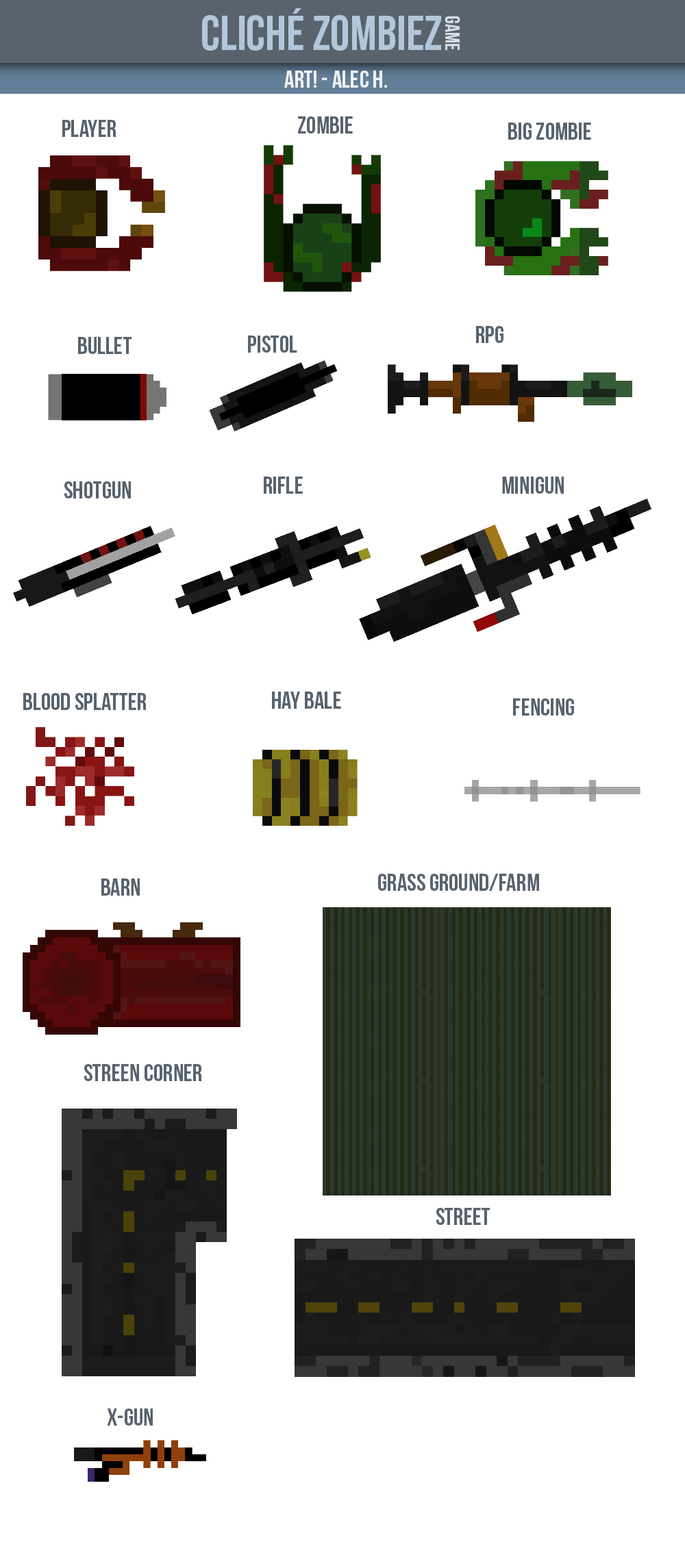
<style>
.page{position:relative;width:685px;height:1568px;background:#ffffff}
.page>*{position:absolute;margin:0}
.t1{font:49.3px "BebasNeue";color:#b2c7db}
.t2{font:20.5px "BebasNeue";color:#d7dfe7}
.t3{font:24.6px "BebasNeue";color:#f0f0f0}
.t4{font:24.6px "BebasNeue";color:#58636d}
</style>
<div class="page">
<p class="t1" style="left:202px;top:8px;width:239px;height:43px">Cliché zombiez</p>
<p class="t2" style="left:444px;top:16px;width:16px;height:35px;rotate:89deg">game</p>
<p class="t3" style="left:284px;top:71px;width:103px;height:17px">art! - Alec h.</p>
<p class="t4" style="left:62px;top:120px;width:54px;height:17px">PLAYER</p>
<p class="t4" style="left:298px;top:116px;width:55px;height:18px">ZOMBIE</p>
<p class="t4" style="left:508px;top:123px;width:83px;height:17px">BIG ZOMBIE</p>
<p class="t4" style="left:476px;top:326px;width:27px;height:17px">RPG</p>
<p class="t4" style="left:78px;top:337px;width:53px;height:17px">BULLET</p>
<p class="t4" style="left:248px;top:336px;width:49px;height:17px">PISTOL</p>
<p class="t4" style="left:64px;top:481px;width:67px;height:17px">shotgun</p>
<p class="t4" style="left:264px;top:477px;width:39px;height:17px">rifle</p>
<p class="t4" style="left:502px;top:477px;width:62px;height:17px">minigun</p>
<p class="t4" style="left:23px;top:693px;width:124px;height:17px">BLOOD SPLATTER</p>
<p class="t4" style="left:272px;top:692px;width:69px;height:17px">HAY BALE</p>
<p class="t4" style="left:513px;top:698px;width:61px;height:18px">FENCING</p>
<p class="t4" style="left:101px;top:878px;width:39px;height:18px">BARN</p>
<p class="t4" style="left:378px;top:874px;width:161px;height:17px">GRASS GROUND/FARM</p>
<p class="t4" style="left:84px;top:1064px;width:118px;height:17px">streen corner</p>
<p class="t4" style="left:436px;top:1208px;width:54px;height:17px">street</p>
<p class="t4" style="left:107px;top:1408px;width:46px;height:18px">x-gun</p>
</div>
